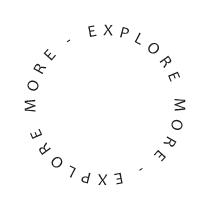
<style>
.page{position:relative;width:210px;height:210px;background:#ffffff}
.page>*{position:absolute;margin:0}
.t1{font:16.7px "Candara";letter-spacing:0.37em;color:#1d1d1d}
</style>
<div class="page">
<p class="t1" style="left:24px;top:24px;width:162px;height:161px">EXPLORE MORE - EXPLORE MORE -</p>
</div>
